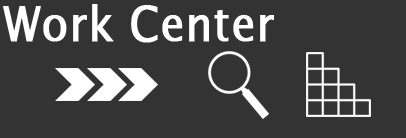
<style>
.page{position:relative;width:406px;height:138px;background:#333333}
.page>*{position:absolute;margin:0}
.t1{font:48px "LucidaSansUnicode";color:#ffffff;font-weight:bold;scale:0.9 1}
</style>
<div class="page">
<p class="t1" style="left:3px;top:4px;width:271px;height:39px">Work Center</p>
</div>
